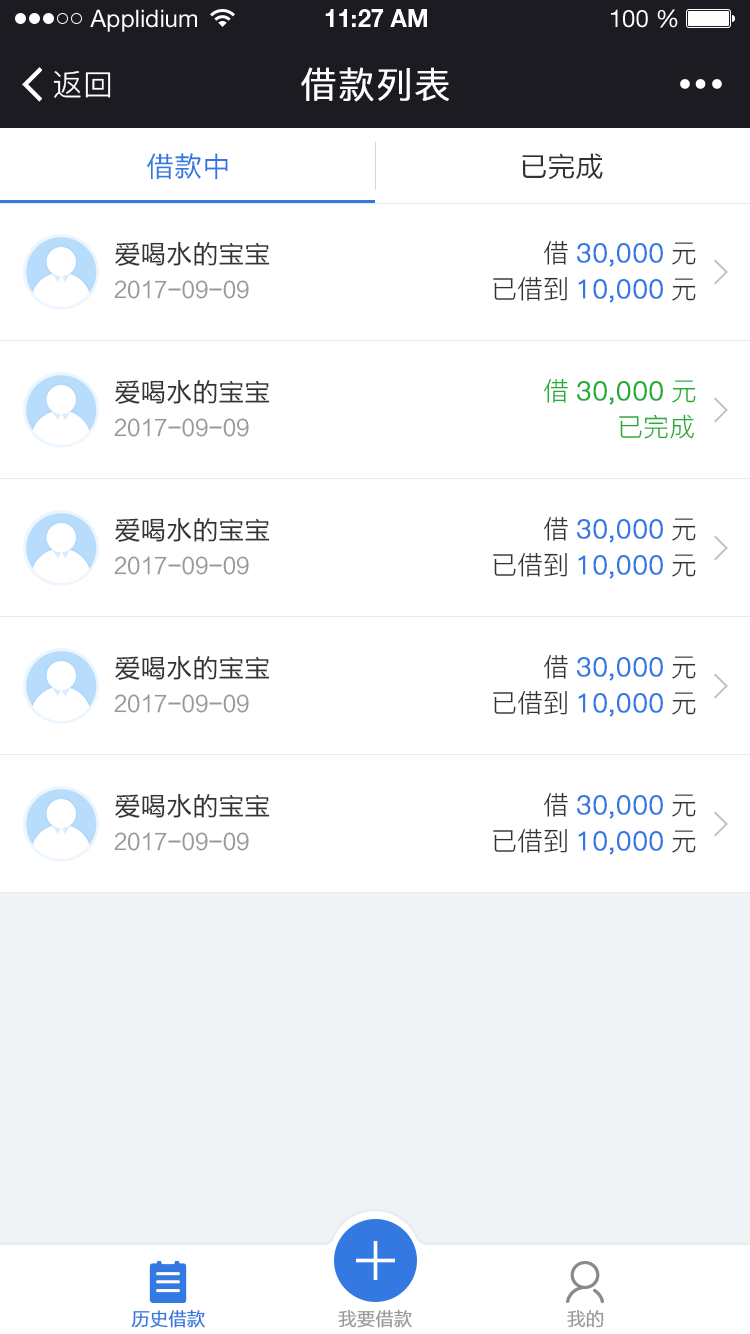
<style>
.page{position:relative;width:750px;height:1334px;background:#ffffff}
.page>*{position:absolute;margin:0}
.t1{font:24px "HelveticaNeueLTStd-Roman";color:#ffffff}
.t2{font:24px "HelveticaNeueLTStd-Bd";color:#ffffff}
.t3{font:30px "PingFang-SC-Regular";letter-spacing:0.025em;color:#ffffff}
.t4{font:36px "PingFang-SC-Regular";letter-spacing:0.025em;color:#ffffff;font-weight:bold}
.t5{font:28px "FZLTH_YS_GBK";color:#3479e1}
.t6{font:28px "FZLTH_YS_GBK";color:#333333}
.t7{font:26px "FZLTH_YS_GBK";color:#333333}
.t8{font:26px "PingFang-SC-Regular";color:#3479e1;font-weight:bold}
.t9{font:26px "PingFang-SC-Regular";color:#333333}
.t10{font:22px "FZLTH_YS_GB18030";color:#999999}
.t11{font:26px "PingFang-SC-Regular";color:#22ac38;font-weight:bold}
.t12{font:26px "PingFang-SC-Regular";color:#22ac38}
.t13{font:18px "FZLTXHK--GBK1-0";color:#3479e1;font-weight:bold}
.t14{font:18px "FZLTXHK--GBK1-0";color:#999999;font-weight:bold}
</style>
<div class="page">
<p class="t1" style="left:90px;top:9px;width:107px;height:23px">Applidium</p>
<p class="t2" style="left:325px;top:9px;width:102px;height:18px">11:27 AM</p>
<p class="t1" style="left:611px;top:9px;width:67px;height:19px">100 %</p>
<p class="t3" style="left:53px;top:71px;width:58px;height:27px">返回</p>
<p class="t4" style="left:301px;top:67px;width:148px;height:35px">借款列表</p>
<p class="t5" style="left:146px;top:153px;width:82px;height:27px">借款中</p>
<p class="t6" style="left:522px;top:153px;width:81px;height:27px">已完成</p>
<p class="t7" style="left:115px;top:241px;width:155px;height:25px">爱喝水的宝宝</p>
<p class="t8" style="left:544px;top:240px;width:152px;height:27px"><span class="t9">借</span>30,000<span class="t9">元</span></p>
<p class="t10" style="left:114px;top:280px;width:135px;height:19px">2017-09-09</p>
<p class="t8" style="left:493px;top:276px;width:203px;height:27px"><span class="t9">已借到</span>10,000<span class="t9">元</span></p>
<p class="t7" style="left:115px;top:379px;width:155px;height:25px">爱喝水的宝宝</p>
<p class="t11" style="left:544px;top:378px;width:152px;height:27px"><span class="t12">借</span>30,000<span class="t12">元</span></p>
<p class="t12" style="left:619px;top:414px;width:75px;height:25px">已完成</p>
<p class="t10" style="left:114px;top:418px;width:135px;height:19px">2017-09-09</p>
<p class="t7" style="left:115px;top:517px;width:155px;height:25px">爱喝水的宝宝</p>
<p class="t8" style="left:544px;top:516px;width:152px;height:27px"><span class="t9">借</span>30,000<span class="t9">元</span></p>
<p class="t10" style="left:114px;top:556px;width:135px;height:19px">2017-09-09</p>
<p class="t8" style="left:493px;top:552px;width:203px;height:27px"><span class="t9">已借到</span>10,000<span class="t9">元</span></p>
<p class="t8" style="left:544px;top:654px;width:152px;height:27px"><span class="t9">借</span>30,000<span class="t9">元</span></p>
<p class="t7" style="left:115px;top:655px;width:155px;height:25px">爱喝水的宝宝</p>
<p class="t10" style="left:114px;top:694px;width:135px;height:19px">2017-09-09</p>
<p class="t8" style="left:493px;top:690px;width:203px;height:27px"><span class="t9">已借到</span>10,000<span class="t9">元</span></p>
<p class="t7" style="left:115px;top:793px;width:155px;height:25px">爱喝水的宝宝</p>
<p class="t8" style="left:544px;top:792px;width:152px;height:27px"><span class="t9">借</span>30,000<span class="t9">元</span></p>
<p class="t10" style="left:114px;top:832px;width:135px;height:19px">2017-09-09</p>
<p class="t8" style="left:493px;top:828px;width:203px;height:27px"><span class="t9">已借到</span>10,000<span class="t9">元</span></p>
<p class="t13" style="left:131px;top:1309px;width:74px;height:19px">历史借款</p>
<p class="t14" style="left:338px;top:1309px;width:74px;height:19px">我要借款</p>
<p class="t14" style="left:567px;top:1309px;width:37px;height:19px">我的</p>
</div>
